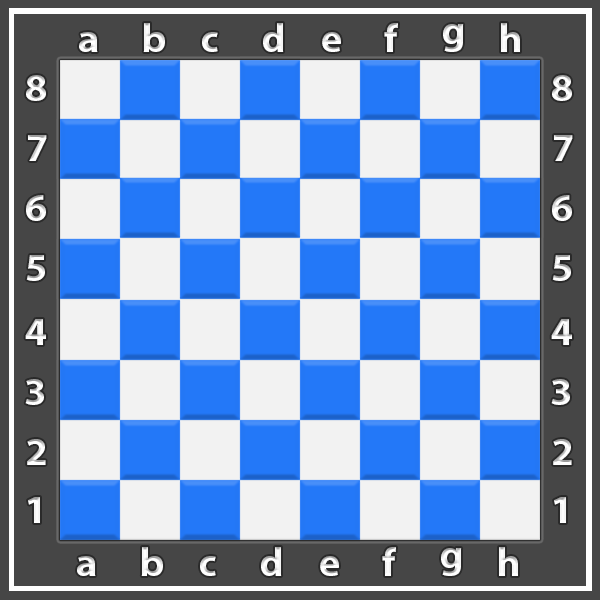
<style>
.page{position:relative;width:600px;height:600px;background:#464646}
.page>*{position:absolute;margin:0}
.t1{font:40px "MyriadPro-Bold";color:#ffffff}
</style>
<div class="page">
<p class="t1" style="left:143px;top:23px;width:22px;height:29px">b</p>
<p class="t1" style="left:263px;top:23px;width:21px;height:29px">d</p>
<p class="t1" style="left:384px;top:23px;width:14px;height:29px">f</p>
<p class="t1" style="left:443px;top:24px;width:21px;height:28px">g</p>
<p class="t1" style="left:501px;top:23px;width:19px;height:29px">h</p>
<p class="t1" style="left:79px;top:32px;width:19px;height:20px">a</p>
<p class="t1" style="left:202px;top:32px;width:16px;height:20px">c</p>
<p class="t1" style="left:322px;top:32px;width:19px;height:20px">e</p>
<p class="t1" style="left:26px;top:75px;width:20px;height:26px">8</p>
<p class="t1" style="left:552px;top:75px;width:20px;height:26px">8</p>
<p class="t1" style="left:28px;top:135px;width:19px;height:26px">7</p>
<p class="t1" style="left:554px;top:135px;width:19px;height:26px">7</p>
<p class="t1" style="left:26px;top:195px;width:20px;height:26px">6</p>
<p class="t1" style="left:552px;top:195px;width:20px;height:26px">6</p>
<p class="t1" style="left:26px;top:255px;width:19px;height:26px">5</p>
<p class="t1" style="left:552px;top:255px;width:19px;height:26px">5</p>
<p class="t1" style="left:25px;top:319px;width:21px;height:26px">4</p>
<p class="t1" style="left:551px;top:319px;width:21px;height:26px">4</p>
<p class="t1" style="left:25px;top:379px;width:19px;height:26px">3</p>
<p class="t1" style="left:551px;top:379px;width:19px;height:26px">3</p>
<p class="t1" style="left:27px;top:439px;width:19px;height:26px">2</p>
<p class="t1" style="left:553px;top:439px;width:19px;height:26px">2</p>
<p class="t1" style="left:28px;top:497px;width:12px;height:26px">1</p>
<p class="t1" style="left:554px;top:497px;width:12px;height:26px">1</p>
<p class="t1" style="left:77px;top:556px;width:19px;height:20px">a</p>
<p class="t1" style="left:141px;top:547px;width:22px;height:29px">b</p>
<p class="t1" style="left:200px;top:556px;width:16px;height:20px">c</p>
<p class="t1" style="left:261px;top:547px;width:21px;height:29px">d</p>
<p class="t1" style="left:320px;top:556px;width:19px;height:20px">e</p>
<p class="t1" style="left:382px;top:547px;width:14px;height:29px">f</p>
<p class="t1" style="left:441px;top:548px;width:21px;height:28px">g</p>
<p class="t1" style="left:499px;top:547px;width:19px;height:29px">h</p>
</div>
